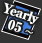
<style>
.page{position:relative;width:42px;height:43px;background:#333333}
.page>*{position:absolute;margin:0}
.t1{font:13px/14px "RyuminPro-ExBold";letter-spacing:-0.08em;color:#ffffff;font-weight:bold}
.t2{font:13px/14px "RyuminPro-ExBold";color:#ffffff;font-weight:bold}
.t3{font:13px/14px "TimesNewRomanPSMT";color:#ffffff;font-weight:bold}
</style>
<div class="page">
<p class="t1" style="left:3px;top:2px;width:36px;height:32px;text-align:center;rotate:19deg">Yearly<br><span class="t2">  05 </span><span class="t3">~</span></p>
</div>
